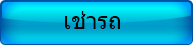
<style>
.page{position:relative;width:193px;height:45px}
.page>*{position:absolute;margin:0}
.t1{font:24px "Tahoma";color:#040404}
</style>
<div class="page">
<p class="t1" style="left:65px;top:11px;width:55px;height:18px">เช่ารถ</p>
</div>
